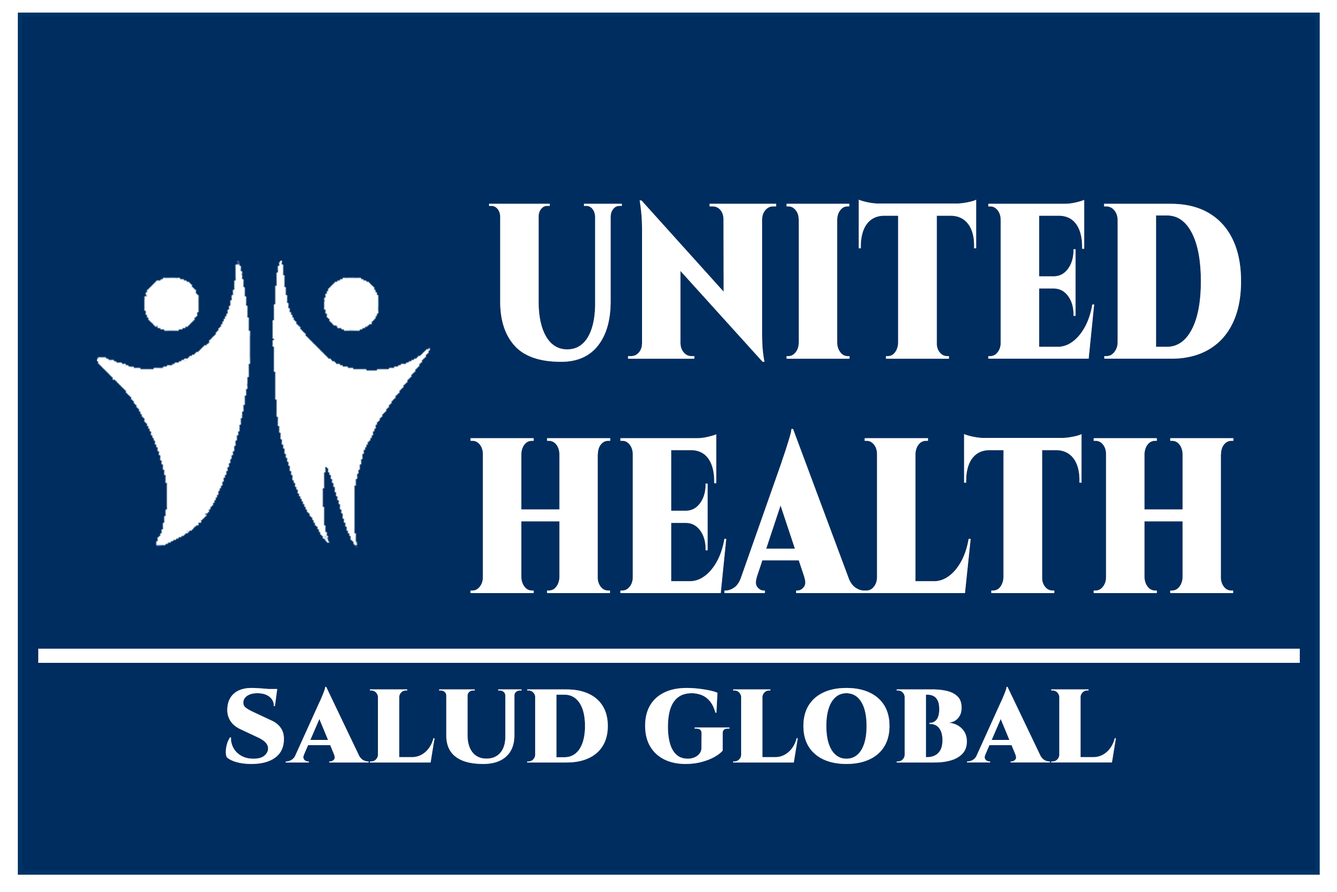
<style>
.page{position:relative;width:1337px;height:892px;background:#002d5f}
.page>*{position:absolute;margin:0}
.t1{font:258px "Cinzel-Black";letter-spacing:0.02em;color:#ffffff;scale:0.76 1}
.t2{font:104.3px "Cinzel-Black";letter-spacing:0.02em;color:#ffffff}
</style>
<div class="page">
<p class="t1" style="left:489px;top:199px;width:752px;height:163px">united</p>
<p class="t1" style="left:470px;top:428px;width:764px;height:165px">health</p>
<p class="t2" style="left:225px;top:686px;width:892px;height:78px">SALUD GLOBAL</p>
</div>
